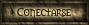
<style>
.page{position:relative;width:89px;height:25px}
.page>*{position:absolute;margin:0}
.t1{font:11px "Morpheus";color:#351f02}
</style>
<div class="page">
<p class="t1" style="left:17px;top:7px;width:54px;height:11px">Conectarse</p>
</div>
